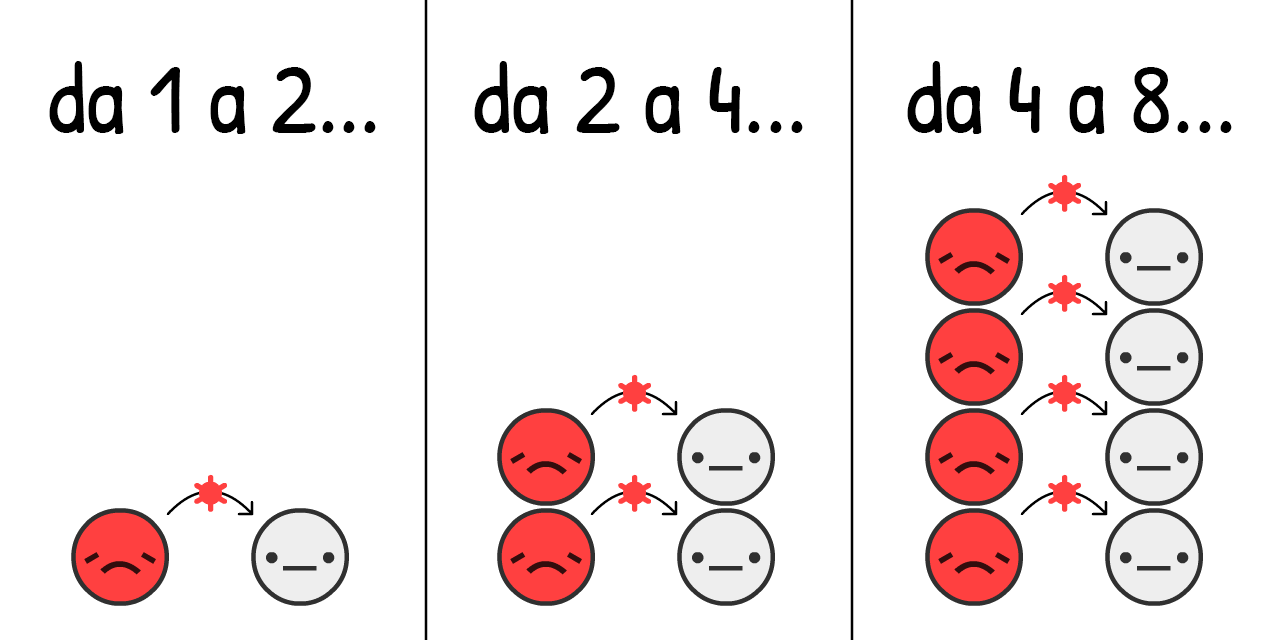
<style>
.page{position:relative;width:1280px;height:640px;background:#ffffff}
.page>*{position:absolute;margin:0}
.t1{font:100px "PatrickHand-Regular";color:#000000}
</style>
<div class="page">
<p class="t1" style="left:49px;top:61px;width:327px;height:73px">da 1 a 2...</p>
<p class="t1" style="left:474px;top:61px;width:329px;height:73px">da 2 a 4...</p>
<p class="t1" style="left:907px;top:61px;width:325px;height:73px">da 4 a 8...</p>
</div>
